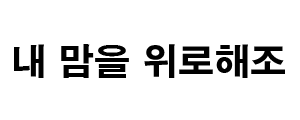
<style>
.page{position:relative;width:300px;height:120px;background:#ffffff}
.page>*{position:absolute;margin:0}
.t1{font:36px "H2gtrE";color:#000000}
</style>
<div class="page">
<p class="t1" style="left:14px;top:44px;width:271px;height:34px">내 맘을 위로해조</p>
</div>
